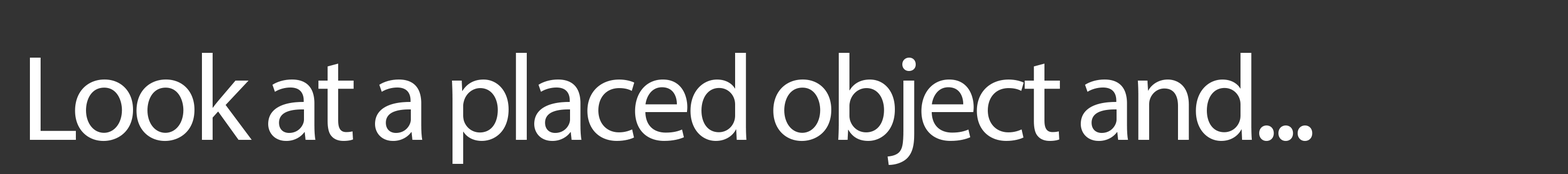
<style>
.page{position:relative;width:1568px;height:174px;background:#333333}
.page>*{position:absolute;margin:0}
.t1{font:122.4px "MyriadPro-Regular";letter-spacing:-0.05em;color:#ffffff}
</style>
<div class="page">
<p class="t1" style="left:30px;top:53px;width:1283px;height:112px">Look at a placed object and...</p>
</div>
